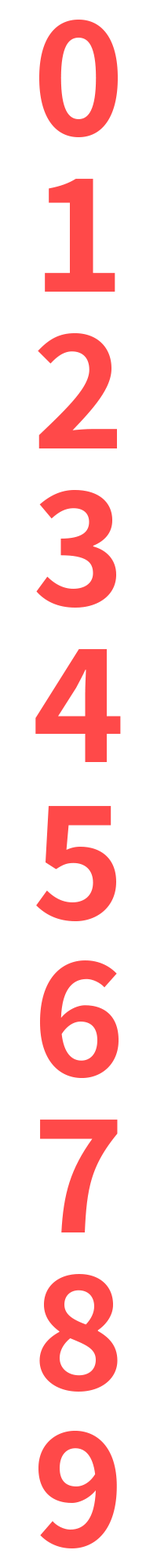
<style>
.page{position:relative;width:157px;height:1568px;background:#ffffff}
.page>*{position:absolute;margin:0}
.t1{font:156.8px/156.8px "NotoSansKR-Bold";color:#ff4949}
</style>
<div class="page">
<p class="t1" style="left:35px;top:20px;width:86px;height:1528px">0<br>1<br>2<br>3<br>4<br>5<br>6<br>7<br>8<br>9</p>
</div>
